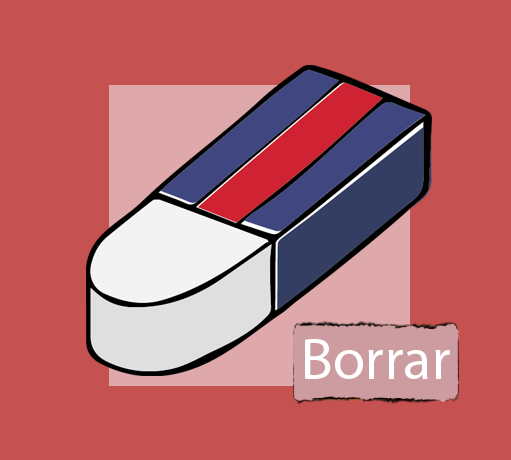
<style>
.page{position:relative;width:511px;height:460px;background:#c65151}
.page>*{position:absolute;margin:0}
.t1{font:58.3px "MyriadHebrew-Regular";color:#ffffff}
</style>
<div class="page">
<p class="t1" style="left:305px;top:339px;width:145px;height:40px">Borrar</p>
</div>
